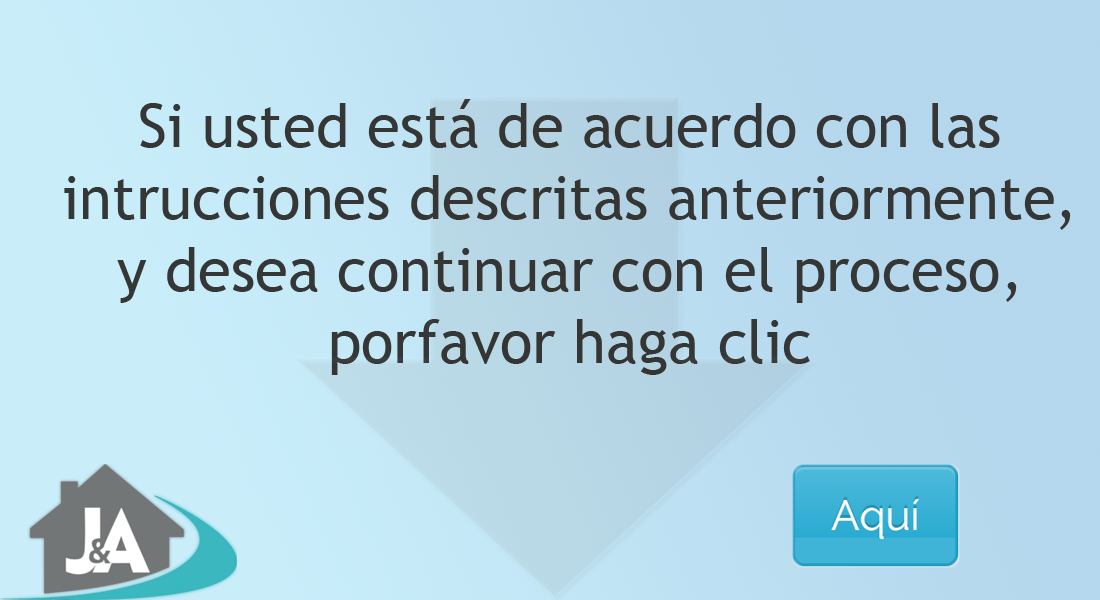
<style>
.page{position:relative;width:1100px;height:600px}
.page>*{position:absolute;margin:0}
.t1{font:60px "TrebuchetMS";color:#353737}
</style>
<div class="page">
<p class="t1" style="left:64px;top:99px;width:1007px;height:276px;text-align:center">Si usted está de acuerdo con las intrucciones descritas anteriormente, y desea continuar con el proceso, porfavor haga clic</p>
</div>
